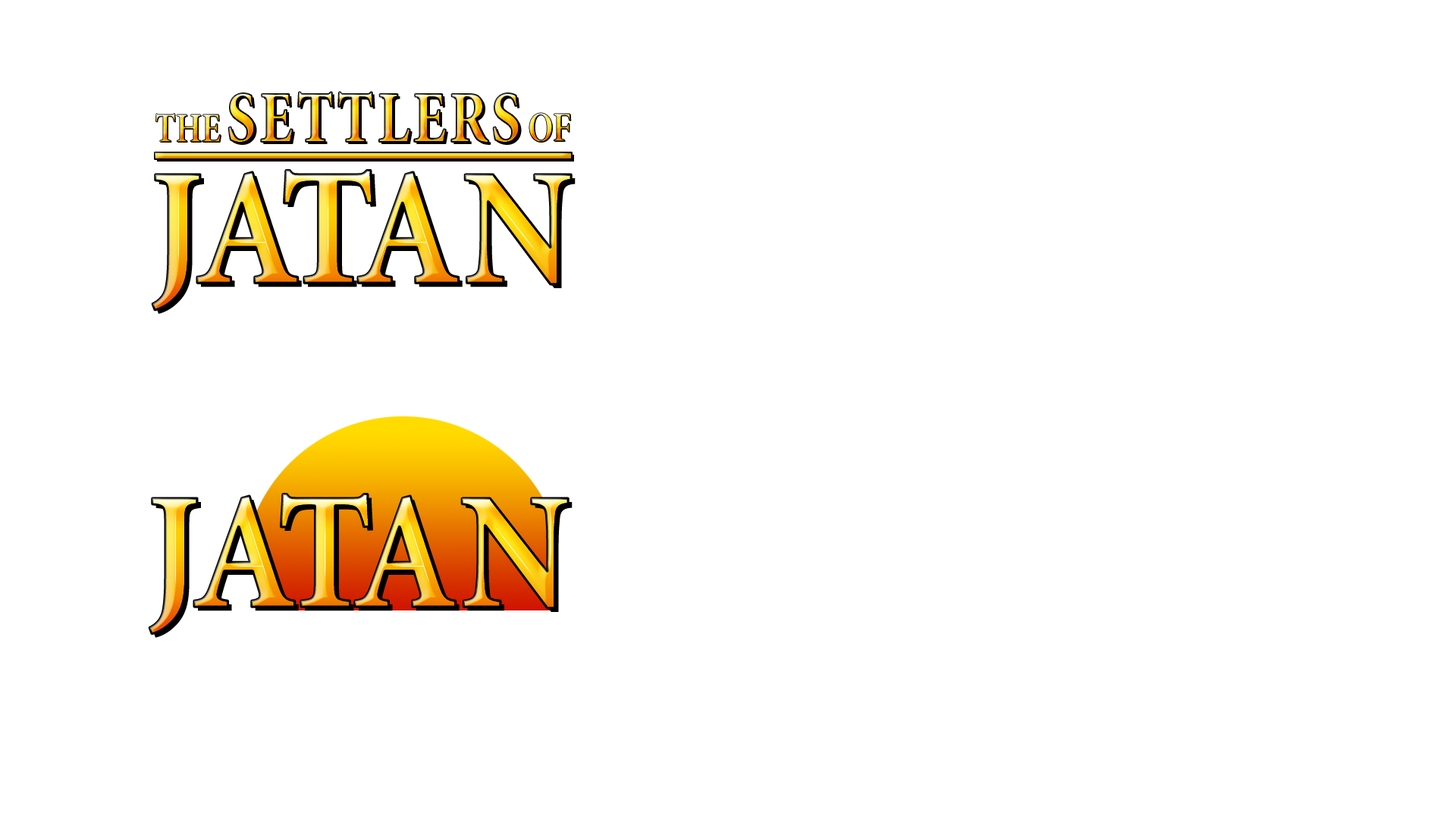
<style>
.page{position:relative;width:1456px;height:819px;background:#ffffff}
.page>*{position:absolute;margin:0}
.t1{font:73.6px "MinionPro-Bold";letter-spacing:0.05em;text-transform:uppercase;scale:0.8 1}
.t2{font:41.7px "MinionPro-Bold";text-transform:uppercase;scale:0.8 1}
.t3{font:166.8px "MinionPro-Bold";letter-spacing:-0.14em;text-transform:uppercase;scale:0.9 1}
</style>
<div class="page">
<p class="t1" style="left:228px;top:92px;width:291px;height:51px">SETTLERS</p>
<p class="t2" style="left:155px;top:113px;width:66px;height:29px">THE</p>
<p class="t2" style="left:529px;top:113px;width:42px;height:29px">OF</p>
<p class="t3" style="left:152px;top:170px;width:420px;height:140px">J ata  n</p>
</div>
